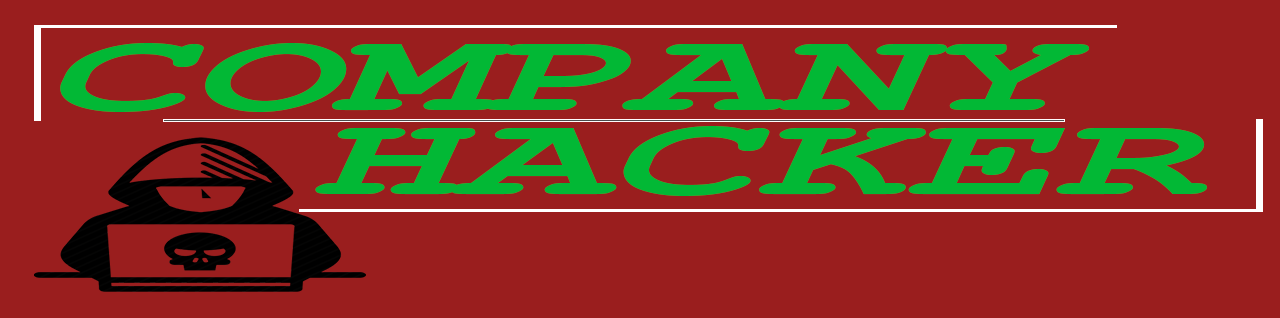
<style>
.page{position:relative;width:1280px;height:318px;background:#9a1e1e}
.page>*{position:absolute;margin:0}
.t1{font:110.5px "CourierNewPS-BoldItalicMT";color:#02b835;scale:2.21 1}
.t2{font:112.3px "CourierNewPS-BoldItalicMT";color:#02b835;scale:2.21 1}
</style>
<div class="page">
<p class="t1" style="left:60px;top:43px;width:1030px;height:69px">COMPANY</p>
<p class="t2" style="left:315px;top:126px;width:892px;height:70px">HACKER</p>
</div>
